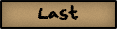
<style>
.page{position:relative;width:117px;height:29px}
.page>*{position:absolute;margin:0}
.t1{font:15px "squeakychalksound";color:#000000}
</style>
<div class="page">
<p class="t1" style="left:38px;top:5px;width:41px;height:15px">Last</p>
</div>
